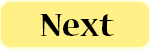
<style>
.page{position:relative;width:150px;height:50px;background:#fff088}
.page>*{position:absolute;margin:0}
.t1{font:35.7px "NuevaStd-Bold";color:#000000}
</style>
<div class="page">
<p class="t1" style="left:40px;top:14px;width:74px;height:22px">Next</p>
</div>
